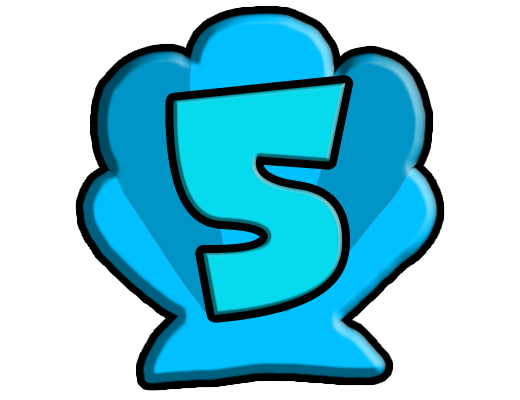
<style>
.page{position:relative;width:520px;height:400px;background:#ffffff}
.page>*{position:absolute;margin:0}
.t1{font:279.4px "Funhouse";color:#06daed}
</style>
<div class="page">
<p class="t1" style="left:173px;top:83px;width:173px;height:232px">5</p>
</div>
